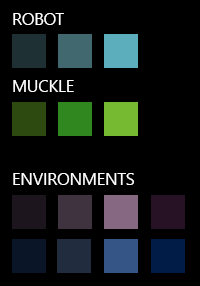
<style>
.page{position:relative;width:200px;height:286px;background:#000000}
.page>*{position:absolute;margin:0}
.t1{font:16.5px "SegoeUI";color:#ffffff}
</style>
<div class="page">
<p class="t1" style="left:13px;top:13px;width:51px;height:12px">ROBOT</p>
<p class="t1" style="left:13px;top:80px;width:61px;height:12px">MUCKLE</p>
<p class="t1" style="left:13px;top:173px;width:121px;height:12px">ENVIRONMENTS</p>
</div>
